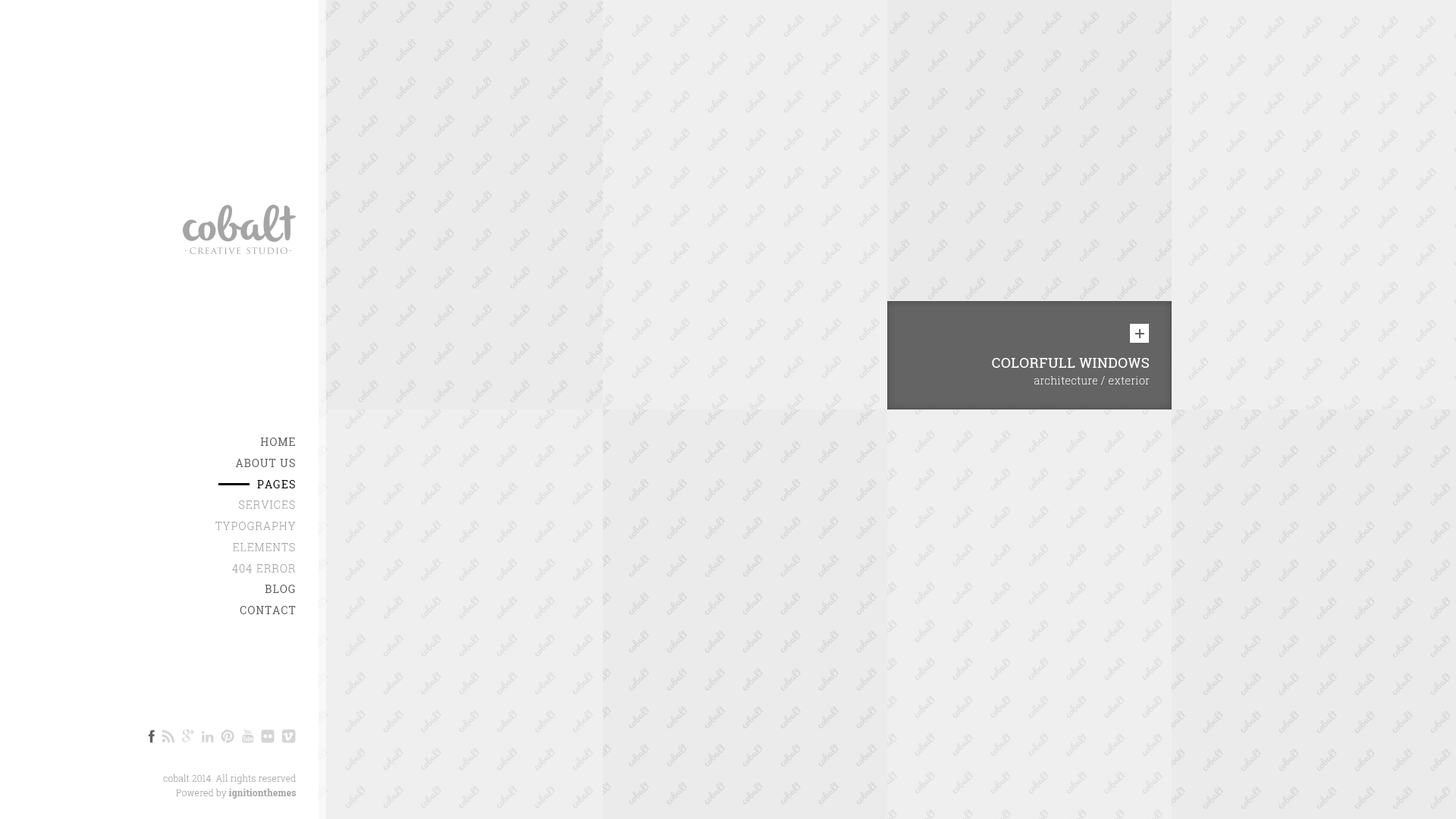
<style>
.page{position:relative;width:1456px;height:819px;background:#efefef}
.page>*{position:absolute;margin:0}
.t1{font:13.6px "RobotoSlab-Regular";letter-spacing:0.03em;color:#ffffff;text-transform:uppercase}
.t2{font:10.6px "RobotoSlab-Thin";letter-spacing:0.03em;color:#ffffff}
.t3{font:10.6px/21.2px "RobotoSlab-Regular";letter-spacing:0.08em;color:#606060}
.t4{font:10.6px/21.2px "RobotoSlab-Regular";letter-spacing:0.08em;color:#000000}
.t5{font:10.6px/21.2px "RobotoSlab-Light";letter-spacing:0.08em;color:#a5a5a5}
.t6{font:9.1px/14.4px "RobotoSlab-Light";letter-spacing:0.01em;color:#a5a5a5}
.t7{font:9.1px/14.4px "RobotoSlab-Bold";letter-spacing:0.01em;color:#a5a5a5}
</style>
<div class="page">
<p class="t1" style="left:992px;top:358px;width:157px;height:10px">COLORFULL WINDOWS</p>
<p class="t2" style="left:1034px;top:376px;width:116px;height:9px">architecture / exterior</p>
<p class="t3" style="left:235px;top:438px;width:60px;height:50px;text-align:right">HOME<br>ABOUT US<br><span class="t4">PAGES</span></p>
<p class="t5" style="left:215px;top:500px;width:81px;height:73px;text-align:right">SERVICES<br>TYPOGRAPHY<br>ELEMENTS<br>404 ERROR</p>
<p class="t3" style="left:240px;top:585px;width:56px;height:29px;text-align:right">BLOG<br>CONTACT</p>
<p class="t6" style="left:163px;top:774px;width:133px;height:25px;text-align:right">cobalt 2014. All rights reserved<br>Powered by <span class="t7">ignitionthemes</span></p>
</div>
